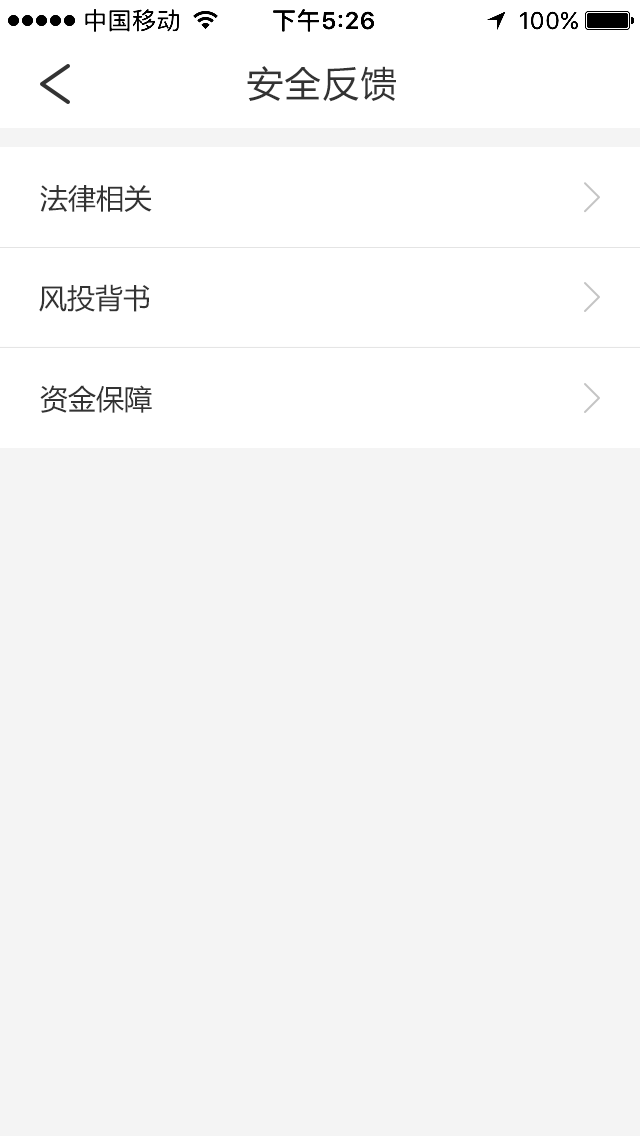
<style>
.page{position:relative;width:640px;height:1136px;background:#f4f4f4}
.page>*{position:absolute;margin:0}
.t1{font:36px "MicrosoftYaHei";letter-spacing:0.05em;color:#333333}
.t2{font:28px "MicrosoftYaHei";color:#333333}
</style>
<div class="page">
<p class="t1" style="left:247px;top:66px;width:149px;height:36px">安全反馈</p>
<p class="t2" style="left:40px;top:185px;width:112px;height:27px">法律相关</p>
<p class="t2" style="left:39px;top:284px;width:111px;height:28px">风投背书</p>
<p class="t2" style="left:40px;top:385px;width:112px;height:28px">资金保障</p>
</div>
